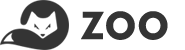
<style>
.page{position:relative;width:185px;height:50px;background:#ffffff}
.page>*{position:absolute;margin:0}
.t1{font:51.1px "CenturyGothic-Bold";color:#343434}
</style>
<div class="page">
<p class="t1" style="left:81px;top:11px;width:87px;height:29px">zoo</p>
</div>
